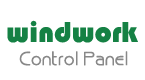
<style>
.page{position:relative;width:145px;height:80px;background:#ffffff}
.page>*{position:absolute;margin:0}
.t1{font:30px "Bauhaus93";color:#158144}
.t2{font:18px "BriskPlain";color:#888888;font-weight:bold}
</style>
<div class="page">
<p class="t1" style="left:7px;top:20px;width:131px;height:23px">windwork</p>
<p class="t2" style="left:19px;top:51px;width:109px;height:15px">Control Panel</p>
</div>
